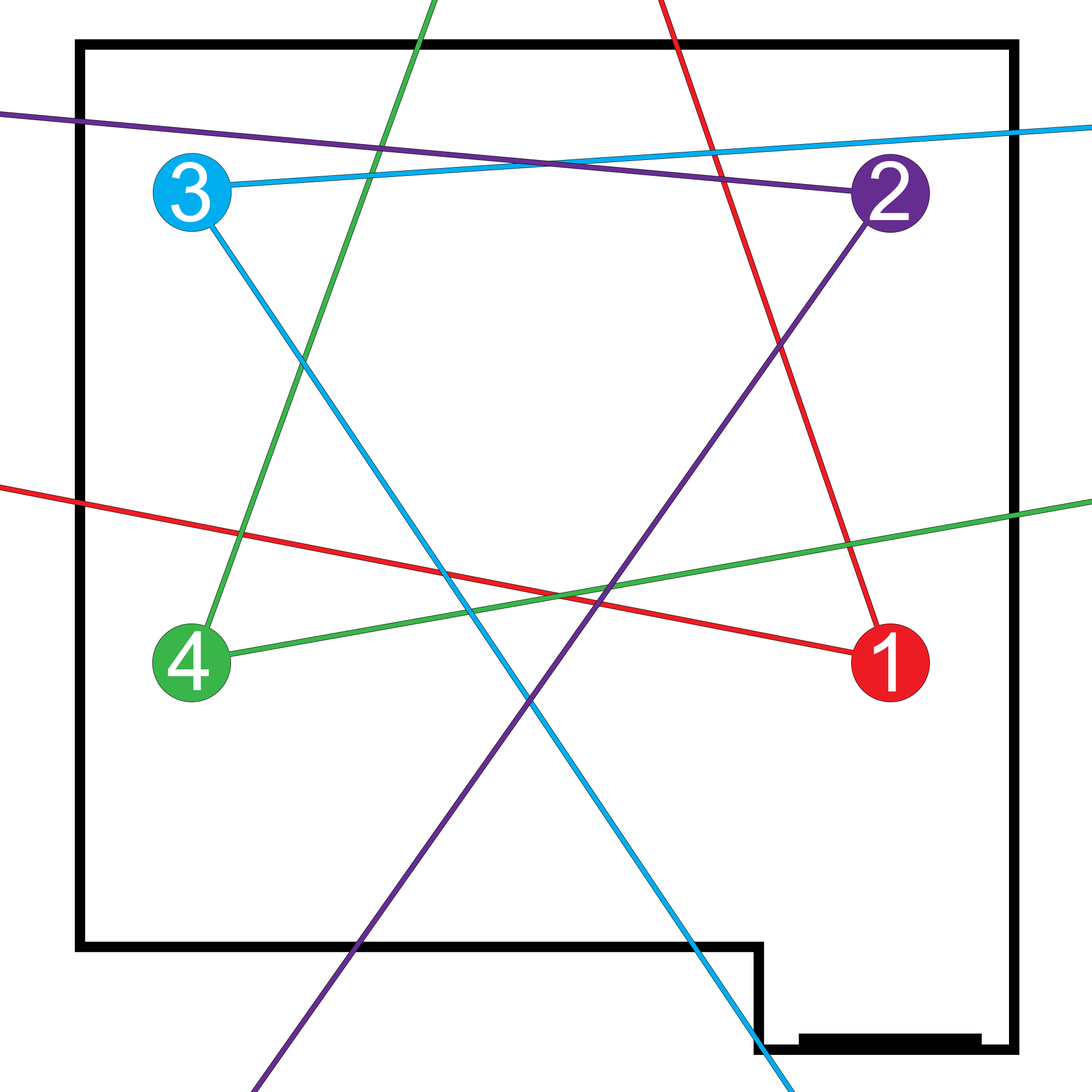
<style>
.page{position:relative;width:1092px;height:1092px;background:#ffffff}
.page>*{position:absolute;margin:0}
.t1{font:81.9px "ArialMT";color:#ffffff}
</style>
<div class="page">
<p class="t1" style="left:171px;top:162px;width:39px;height:60px">3</p>
<p class="t1" style="left:870px;top:161px;width:39px;height:59px">2</p>
<p class="t1" style="left:168px;top:631px;width:41px;height:59px">4</p>
<p class="t1" style="left:874px;top:632px;width:22px;height:60px">1</p>
</div>
